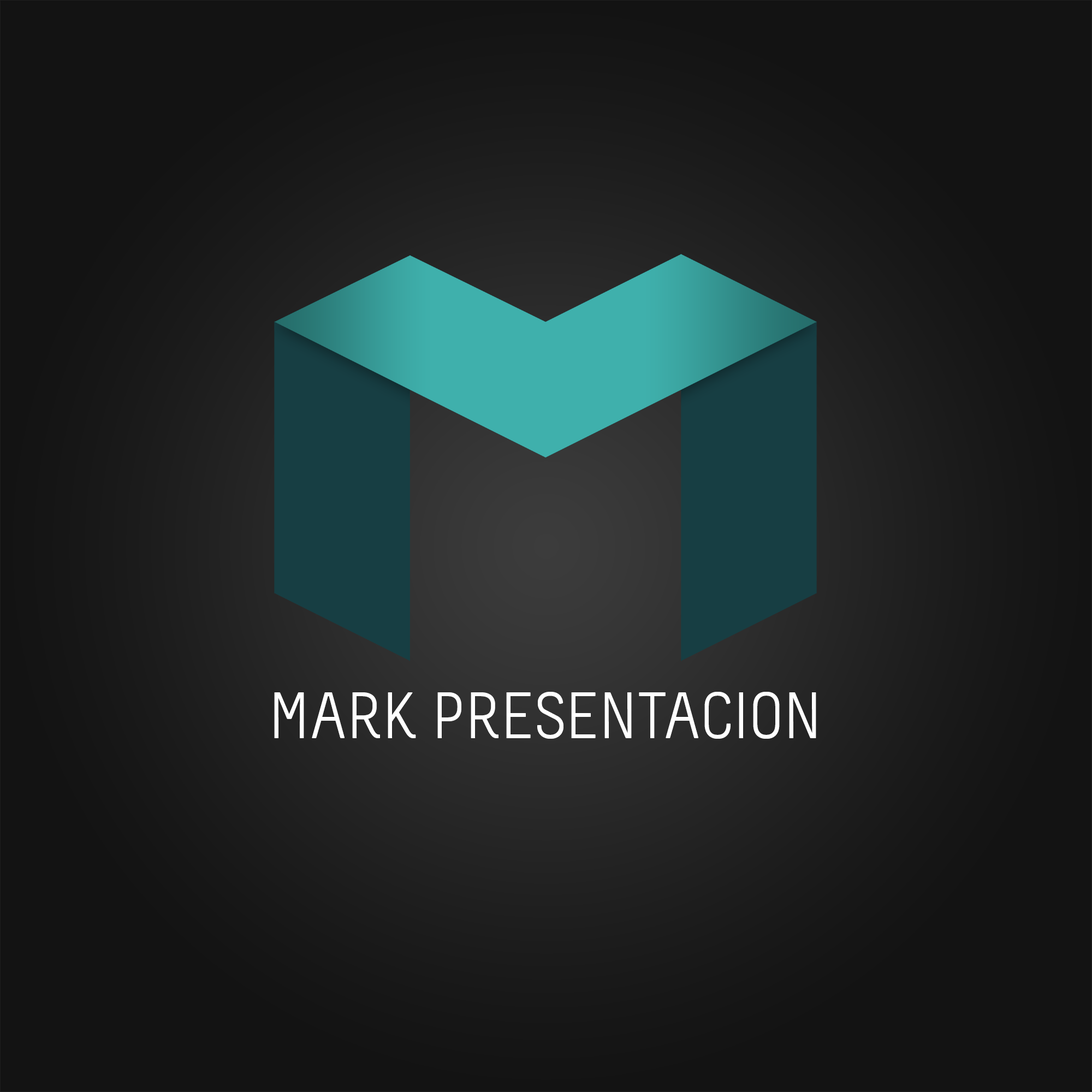
<style>
.page{position:relative;width:1092px;height:1092px;background:#131313}
.page>*{position:absolute;margin:0}
.t1{font:65.7px "Melbourne";color:#ffffff}
</style>
<div class="page">
<p class="t1" style="left:274px;top:692px;width:542px;height:47px">MARK PRESENTACION</p>
</div>
